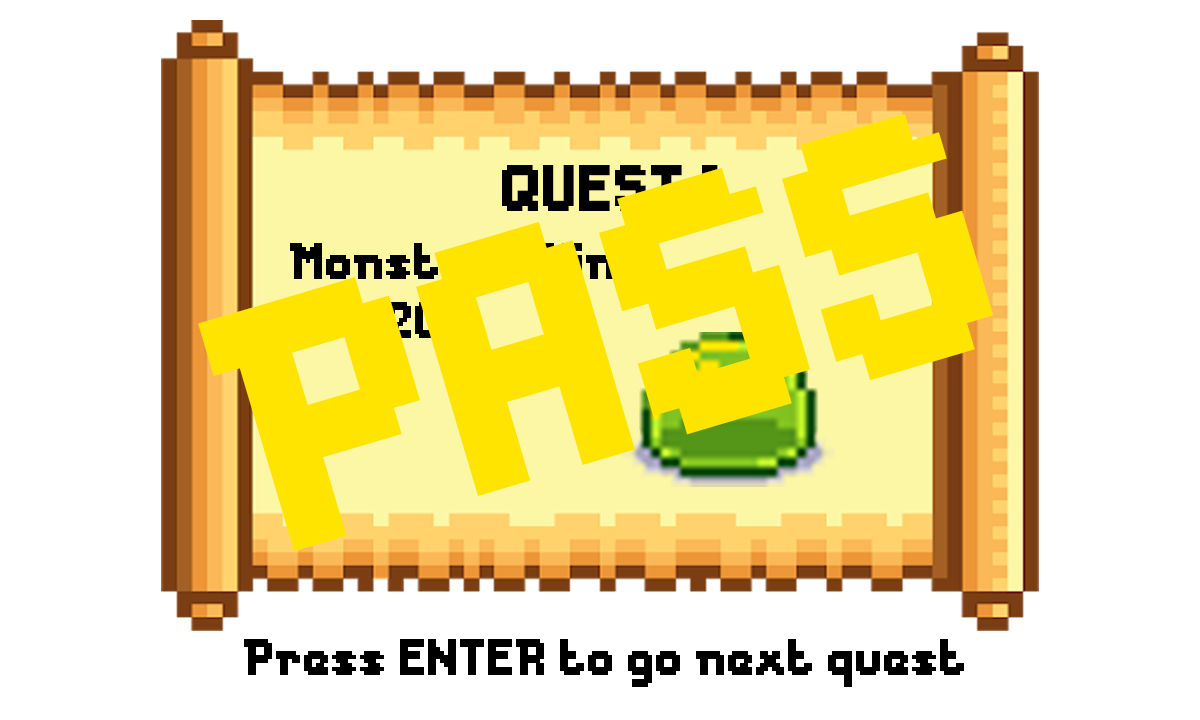
<style>
.page{position:relative;width:1200px;height:720px;background:#ffffff}
.page>*{position:absolute;margin:0}
.t1{font:327.3px "Messe-Duesseldorf";color:#ffe400}
.t2{font:61.3px "Messe-Duesseldorf";color:#000000}
.t3{font:48px "Messe-Duesseldorf"}
.t4{font:48px "Messe-Duesseldorf";color:#ffe400}
.t5{font:48px "Messe-Duesseldorf";color:#000000}
</style>
<div class="page">
<p class="t1" style="left:198px;top:113px;width:796px;height:439px;rotate:-17deg">PASS</p>
<p class="t2" style="left:502px;top:165px;width:216px;height:46px">QUEST 1</p>
<p class="t3" style="left:290px;top:243px;width:368px;height:36px">Monster : Slime</p>
<p class="t4" style="left:291px;top:302px;width:148px;height:36px">HP : 20</p>
<p class="t5" style="left:244px;top:639px;width:720px;height:48px">Press ENTER to go next quest</p>
</div>
